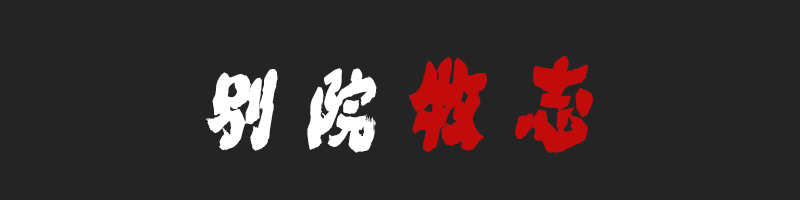
<style>
.page{position:relative;width:800px;height:200px;background:#242424}
.page>*{position:absolute;margin:0}
.t1{font:92.4px "Konshin";letter-spacing:0.348em;color:#ffffff;font-style:italic;scale:0.8 1}
.t2{font:105.6px "Konshin";letter-spacing:0.261em;color:#c20c0c;font-style:italic;scale:0.8 1}
</style>
<div class="page">
<p class="t1" style="left:205px;top:55px;width:388px;height:98px">別院<span class="t2">牧志</span></p>
</div>
